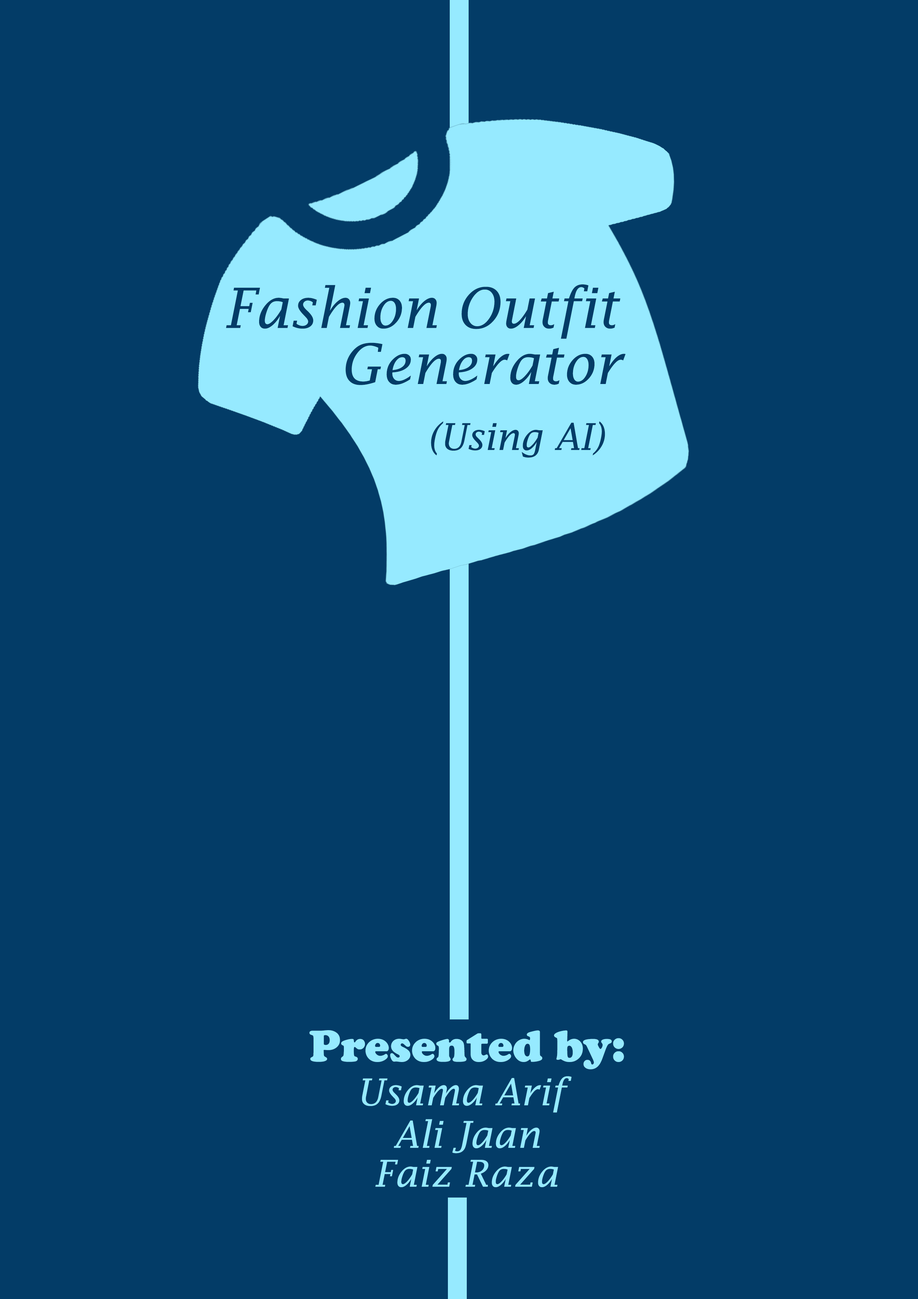
<style>
.page{position:relative;width:918px;height:1299px;background:#033c67}
.page>*{position:absolute;margin:0}
.t1{font:55.5px "LucidaFax-Italic";color:#033c67}
.t2{font:37px "LucidaFax-Italic";color:#033c67}
.t3{font:46.3px "CooperBlack";color:#96eaff}
.t4{font:37px "LucidaFax-Italic";color:#96eaff}
</style>
<div class="page">
<p class="t1" style="left:226px;top:284px;width:394px;height:55px">Fashion Outfit</p>
<p class="t1" style="left:345px;top:342px;width:281px;height:43px">Generator</p>
<p class="t2" style="left:431px;top:421px;width:174px;height:37px">(Using AI)</p>
<p class="t3" style="left:310px;top:1030px;width:314px;height:39px">Presented by:</p>
<p class="t4" style="left:362px;top:1076px;width:210px;height:37px">Usama Arif</p>
<p class="t4" style="left:394px;top:1119px;width:146px;height:34px">Ali Jaan</p>
<p class="t4" style="left:375px;top:1160px;width:183px;height:27px">Faiz Raza</p>
</div>
